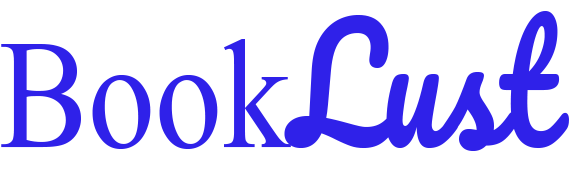
<style>
.page{position:relative;width:576px;height:180px;background:#ffffff}
.page>*{position:absolute;margin:0}
.t1{font:156px "IskoolaPota";color:#2f21e9;scale:0.86 1}
.t2{font:156px "Pacifico-Regular";color:#2f21e9;scale:0.86 1}
</style>
<div class="page">
<p class="t1" style="left:1px;top:11px;width:568px;height:140px">Book<span class="t2">Lust</span></p>
</div>
